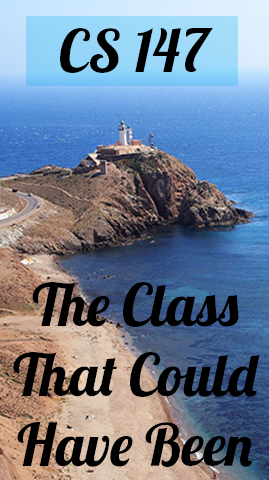
<style>
.page{position:relative;width:269px;height:480px}
.page>*{position:absolute;margin:0}
.t1{font:12px "Lobster1.4";color:#000000}
</style>
<div class="page">
<p class="t1" style="left:60px;top:28px;width:153px;height:45px">CS 147</p>
<p class="t1" style="left:13px;top:282px;width:247px;height:185px;text-align:center">The Class<br>That Could<br>Have Been</p>
</div>
